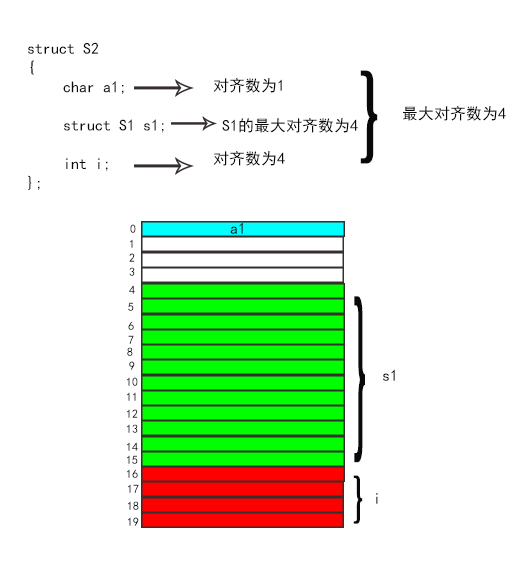
<style>
.page{position:relative;width:531px;height:571px;background:#ffffff}
.page>*{position:absolute;margin:0}
.t1{font:16px "SimHei";color:#0a0909}
.t2{font:106.4px "SimHei";color:#0a0909;scale:0.74 1}
.t3{font:12px "SimHei"}
.t4{font:12px "SimHei";color:#0a0909}
.t5{font:190.3px "SimHei";color:#0a0909;scale:0.27 1}
.t6{font:55.6px "SimHei";color:#0a0909;scale:0.74 1}
.t7{font:16px "SimHei"}
</style>
<div class="page">
<p class="t1" style="left:28px;top:42px;width:136px;height:148px">struct S2<br>{<br> char a1;<br><br> struct S1 s1;<br><br> int i;<br>};</p>
<p class="t1" style="left:213px;top:77px;width:69px;height:16px">对齐数为1</p>
<p class="t2" style="left:360px;top:70px;width:18px;height:94px">}</p>
<p class="t1" style="left:403px;top:105px;width:103px;height:16px">最大对齐数为4</p>
<p class="t1" style="left:222px;top:117px;width:136px;height:16px">S1的最大对齐数为4</p>
<p class="t1" style="left:213px;top:150px;width:72px;height:16px">对齐数为4</p>
<p class="t1" style="left:230px;top:222px;width:13px;height:12px">a1</p>
<p class="t3" style="left:130px;top:224px;width:6px;height:9px">0</p>
<p class="t3" style="left:130px;top:239px;width:3px;height:9px">1</p>
<p class="t3" style="left:129px;top:253px;width:6px;height:9px">2</p>
<p class="t4" style="left:129px;top:267px;width:6px;height:9px">3</p>
<p class="t3" style="left:129px;top:285px;width:6px;height:9px">4</p>
<p class="t3" style="left:128px;top:302px;width:6px;height:9px">5</p>
<p class="t5" style="left:354px;top:296px;width:11px;height:167px">}</p>
<p class="t4" style="left:128px;top:321px;width:6px;height:9px">6</p>
<p class="t3" style="left:128px;top:335px;width:6px;height:9px">7</p>
<p class="t4" style="left:127px;top:347px;width:6px;height:9px">8</p>
<p class="t4" style="left:129px;top:361px;width:6px;height:9px">9</p>
<p class="t3" style="left:127px;top:377px;width:11px;height:9px">10</p>
<p class="t1" style="left:383px;top:369px;width:12px;height:12px">s1</p>
<p class="t3" style="left:127px;top:392px;width:9px;height:9px">11</p>
<p class="t3" style="left:127px;top:409px;width:11px;height:9px">12</p>
<p class="t4" style="left:127px;top:424px;width:11px;height:9px">13</p>
<p class="t3" style="left:127px;top:442px;width:11px;height:9px">14</p>
<p class="t3" style="left:127px;top:455px;width:11px;height:9px">15</p>
<p class="t4" style="left:127px;top:469px;width:11px;height:9px">16</p>
<p class="t3" style="left:128px;top:484px;width:11px;height:9px">17</p>
<p class="t6" style="left:353px;top:475px;width:10px;height:49px">}</p>
<p class="t7" style="left:376px;top:493px;width:2px;height:11px">i</p>
<p class="t4" style="left:128px;top:501px;width:11px;height:9px">18</p>
<p class="t4" style="left:128px;top:517px;width:11px;height:9px">19</p>
</div>
